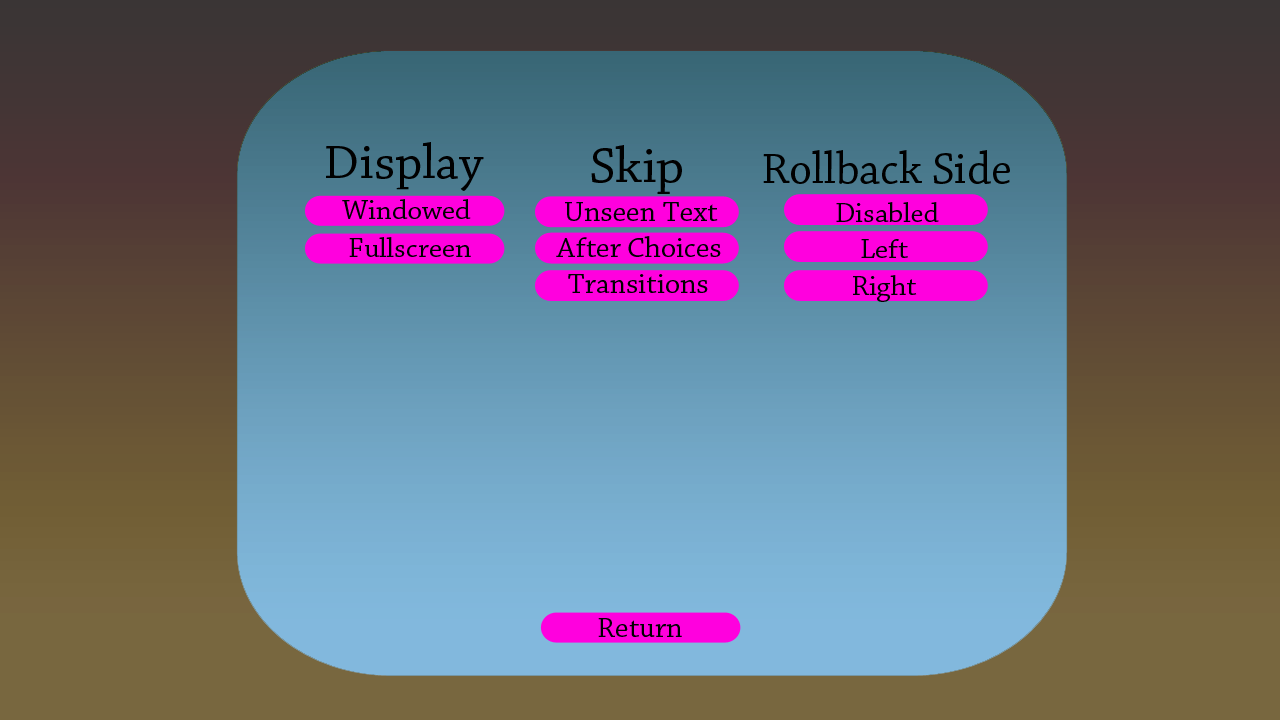
<style>
.page{position:relative;width:1280px;height:720px}
.page>*{position:absolute;margin:0}
.t1{font:50.7px "ChaparralPro-Regular";color:#000000;scale:1.03 1}
.t2{font:52px "ChaparralPro-Regular";color:#000000;scale:1.03 1}
.t3{font:45.4px "ChaparralPro-Regular";color:#000000}
.t4{font:28.3px "ChaparralPro-Regular";color:#000000;scale:1.03 1}
.t5{font:29px "ChaparralPro-Regular";color:#000000;scale:1.03 1}
</style>
<div class="page">
<p class="t1" style="left:326px;top:142px;width:158px;height:49px">Display</p>
<p class="t2" style="left:591px;top:145px;width:91px;height:49px">Skip</p>
<p class="t3" style="left:763px;top:150px;width:247px;height:34px">Rollback Side</p>
<p class="t4" style="left:342px;top:199px;width:129px;height:20px">Windowed</p>
<p class="t5" style="left:565px;top:202px;width:153px;height:19px">Unseen Text</p>
<p class="t4" style="left:836px;top:202px;width:103px;height:20px">Disabled</p>
<p class="t4" style="left:349px;top:237px;width:122px;height:20px">Fullscreen</p>
<p class="t5" style="left:556px;top:236px;width:165px;height:21px">After Choices</p>
<p class="t4" style="left:861px;top:239px;width:47px;height:19px">Left</p>
<p class="t5" style="left:568px;top:274px;width:140px;height:19px">Transitions</p>
<p class="t4" style="left:853px;top:275px;width:64px;height:27px">Right</p>
<p class="t5" style="left:598px;top:618px;width:84px;height:19px">Return</p>
</div>
